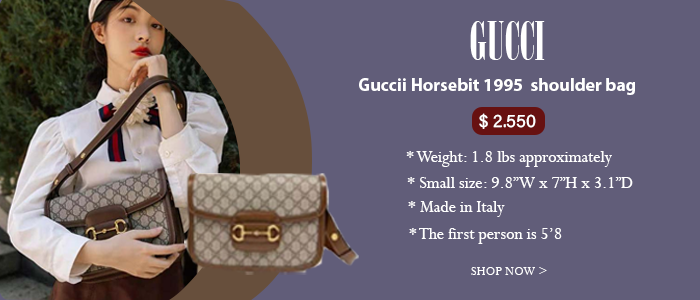
<style>
.page{position:relative;width:700px;height:300px;background:#615d79}
.page>*{position:absolute;margin:0}
.t1{font:53.4px "Onyx";color:#ffffff}
.t2{font:18px "MyriadPro-Bold";color:#ffffff}
.t3{font:18px "AcuminConcept-Regular";color:#ffffff}
.t4{font:18px "Perpetua";color:#ffffff}
.t5{font:13.5px "Perpetua";color:#ffffff}
</style>
<div class="page">
<p class="t1" style="left:470px;top:21px;width:75px;height:39px">GUCCI</p>
<p class="t2" style="left:359px;top:78px;width:276px;height:17px">Guccii Horsebit 1995  shoulder bag</p>
<p class="t3" style="left:479px;top:113px;width:57px;height:16px">$ 2.550</p>
<p class="t4" style="left:406px;top:151px;width:206px;height:16px">* Weight: 1.8 lbs approximately</p>
<p class="t4" style="left:407px;top:177px;width:226px;height:11px">* Small size: 9.8”W x 7”H x 3.1”D</p>
<p class="t4" style="left:408px;top:201px;width:97px;height:16px">* Made in Italy</p>
<p class="t4" style="left:409px;top:228px;width:153px;height:16px">* The first person is 5’8</p>
<p class="t5" style="left:471px;top:267px;width:76px;height:8px">SHOP NOW &gt;</p>
</div>
